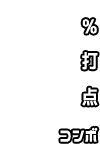
<style>
.page{position:relative;width:100px;height:144px;background:#ffffff}
.page>*{position:absolute;margin:0}
.t1{font:19.3px "NicoKaku";color:#ffffff;scale:0.86 1}
</style>
<div class="page">
<p class="t1" style="left:82px;top:19px;width:15px;height:15px">%</p>
<p class="t1" style="left:82px;top:52px;width:16px;height:18px">打</p>
<p class="t1" style="left:82px;top:87px;width:16px;height:19px">点</p>
<p class="t1" style="left:60px;top:127px;width:38px;height:15px">コンボ</p>
</div>
